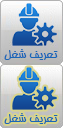
<style>
.page{position:relative;width:63px;height:128px}
.page>*{position:absolute;margin:0}
.t1{font:12px "BHoma";color:#1966b8}
</style>
<div class="page">
<p class="t1" style="left:4px;top:49px;width:54px;height:11px">تعریف شغل</p>
<p class="t1" style="left:4px;top:113px;width:54px;height:11px">تعریف شغل</p>
</div>
